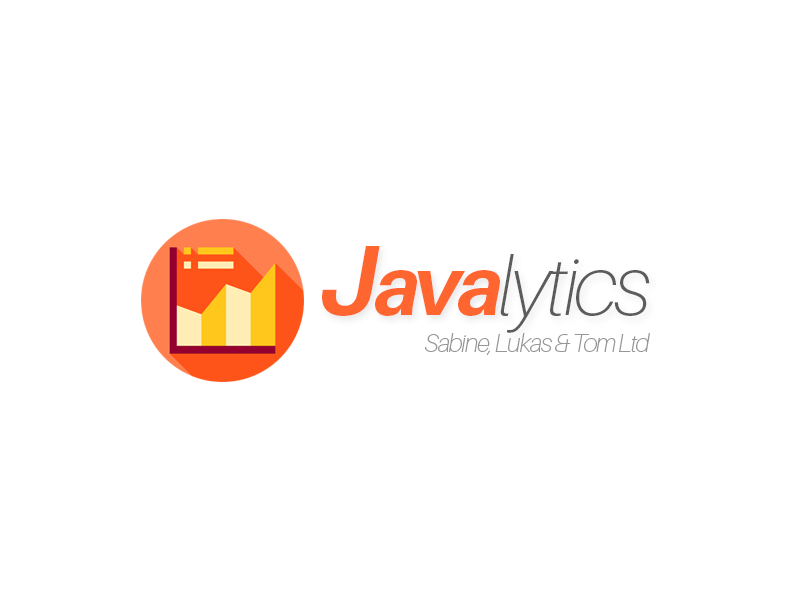
<style>
.page{position:relative;width:800px;height:600px;background:#ffffff}
.page>*{position:absolute;margin:0}
.t1{font:83.3px "Aileron-ThinItalic";letter-spacing:-0.05em;color:#5c5c5c}
.t2{font:100px "Aileron-BoldItalic";letter-spacing:-0.05em;color:#ff652e}
.t3{font:83.3px "Aileron-BoldItalic";letter-spacing:-0.05em;color:#ff652e}
.t4{font:25px "Aileron-ThinItalic";letter-spacing:-0.05em;color:#979797}
</style>
<div class="page">
<p class="t1" style="left:322px;top:246px;width:328px;height:87px"><span class="t2">J</span><span class="t3">ava</span>lytics</p>
<p class="t4" style="left:425px;top:333px;width:225px;height:22px">Sabine, Lukas &amp; Tom Ltd</p>
</div>
